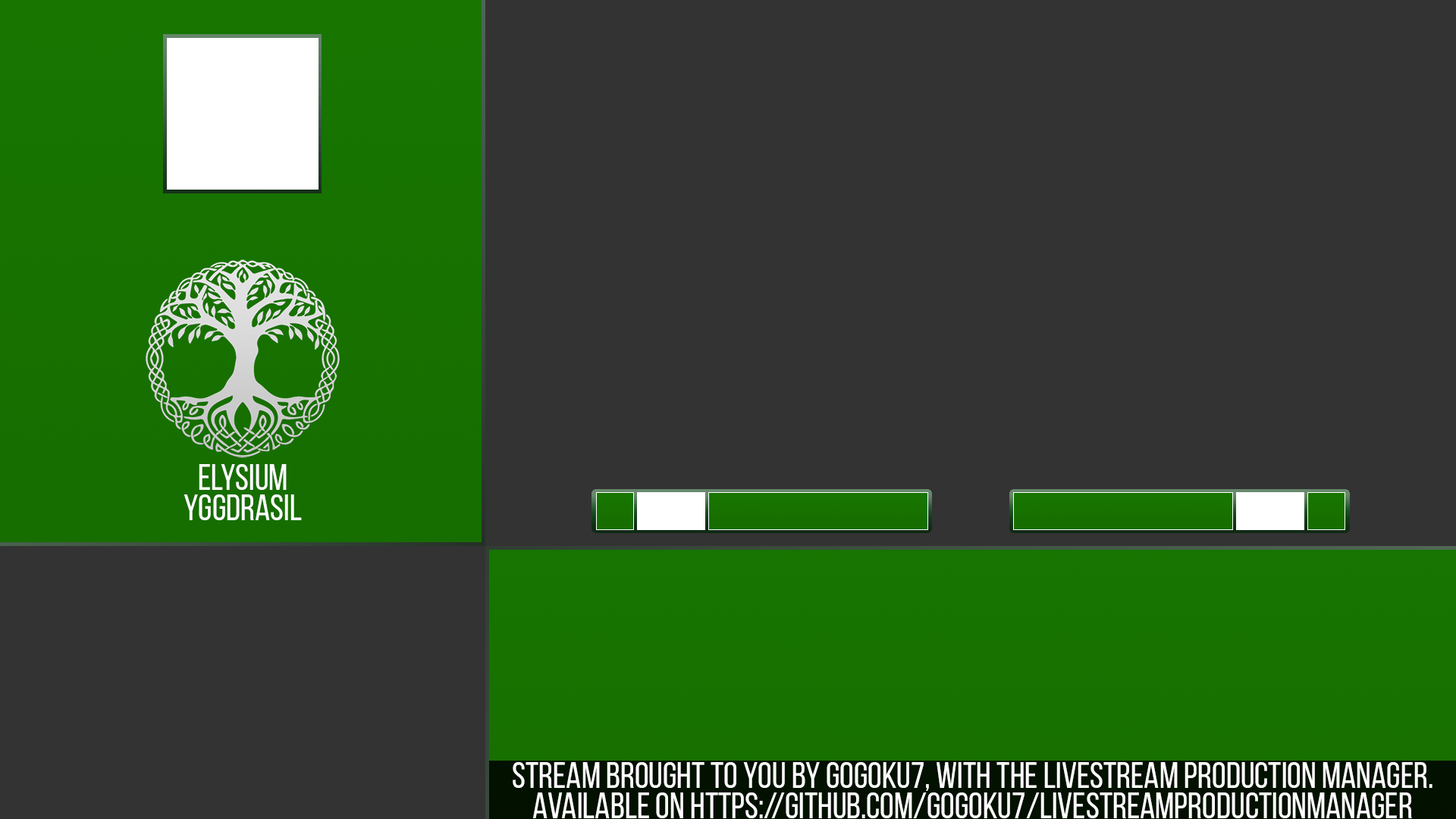
<style>
.page{position:relative;width:1456px;height:819px;background:#333333}
.page>*{position:absolute;margin:0}
.t1{font:36.4px/30.3px "BebasNeue-Regular";color:#ffffff}
</style>
<div class="page">
<p class="t1" style="left:184px;top:464px;width:118px;height:56px;text-align:center">Elysium<br>Yggdrasil</p>
<p class="t1" style="left:513px;top:762px;width:919px;height:56px;text-align:center">Stream brought to you by Gogoku7, with the LiveStream Production Manager.<br>Available on https://github.com/Gogoku7/LivestreamProductionManager</p>
</div>
